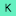
<style>
.page{position:relative;width:16px;height:16px;background:#65f0c0}
.page>*{position:absolute;margin:0}
.t1{font:11px "JosefinSans";color:#000000}
</style>
<div class="page">
<p class="t1" style="left:5px;top:3px;width:7px;height:9px">K</p>
</div>
